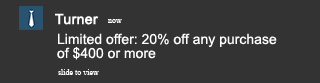
<style>
.page{position:relative;width:320px;height:83px;background:#333333}
.page>*{position:absolute;margin:0}
.t1{font:14px "ArialMT";color:#ffffff;font-weight:bold}
.t2{font:8px "TimesNewRomanPSMT";color:#ffffff}
.t3{font:14px/14px "ArialMT";color:#ffffff}
</style>
<div class="page">
<p class="t1" style="left:55px;top:13px;width:44px;height:12px">Turner</p>
<p class="t2" style="left:108px;top:19px;width:14px;height:4px">now</p>
<p class="t3" style="left:57px;top:33px;width:220px;height:27px">Limited offer: 20% off any purchase <br>of $400 or more</p>
<p class="t2" style="left:58px;top:69px;width:41px;height:6px">slide to view</p>
</div>
